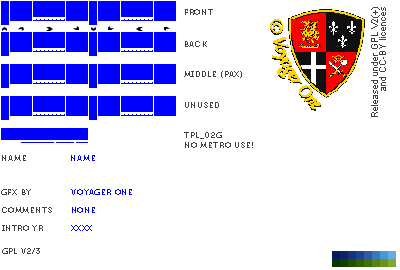
<style>
.page{position:relative;width:400px;height:270px;background:#ffffff}
.page>*{position:absolute;margin:0}
.t1{font:8px "Museo700-Regular";letter-spacing:0.075em;color:#404040;text-transform:uppercase}
.t2{font:8px "Museo700-Regular";letter-spacing:0.075em;color:#0000ff;text-transform:uppercase}
</style>
<div class="page">
<p class="t1" style="left:185px;top:9px;width:28px;height:6px">front</p>
<p class="t1" style="left:185px;top:41px;width:22px;height:6px">back</p>
<p class="t1" style="left:184px;top:71px;width:58px;height:7px">middle (pax)</p>
<p class="t1" style="left:185px;top:102px;width:34px;height:6px">UNUSED</p>
<p class="t1" style="left:184px;top:132px;width:69px;height:16px">tpl_02G<br>no metro use!</p>
<p class="t1" style="left:2px;top:155px;width:24px;height:6px">name</p>
<p class="t2" style="left:71px;top:155px;width:24px;height:6px">name</p>
<p class="t1" style="left:1px;top:189px;width:30px;height:6px">gfx by</p>
<p class="t2" style="left:71px;top:189px;width:61px;height:6px">voyager one</p>
<p class="t1" style="left:2px;top:207px;width:50px;height:6px">comments</p>
<p class="t2" style="left:72px;top:207px;width:23px;height:6px">none</p>
<p class="t1" style="left:2px;top:225px;width:41px;height:6px">intro yr</p>
<p class="t2" style="left:71px;top:225px;width:21px;height:6px">xxxx</p>
<p class="t1" style="left:2px;top:248px;width:38px;height:6px">gpl v2/3</p>
</div>
